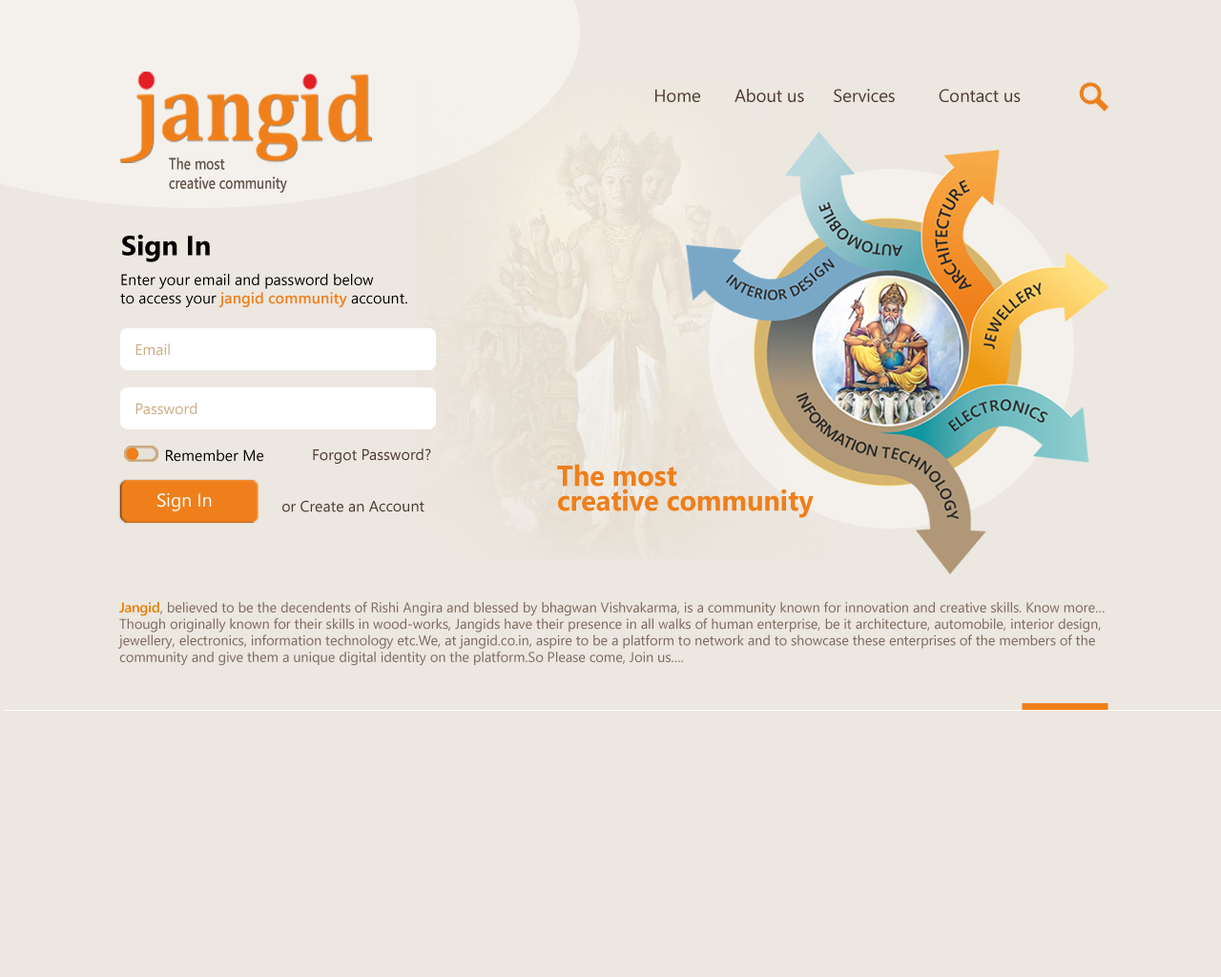
<style>
.page{position:relative;width:1221px;height:977px;background:#ece7e0}
.page>*{position:absolute;margin:0}
.t1{font:17.6px "SegoeUI";color:#4c392f}
.t2{font:16.2px "SegoeUI-Semibold";color:#5f5247;scale:0.81 1}
.t3{font:27.6px "SegoeUI-Bold";color:#000000}
.t4{font:15.3px "SegoeUI";color:#010100}
.t5{font:15.3px "SegoeUI-Semibold";color:#ef7f1a}
.t6{font:15.3px "SegoeUI";color:#ccac85}
.t7{font:15.3px "SegoeUI";color:#4c392f}
.t8{font:29.1px/24.8px "SegoeUI-Bold";color:#ef7f1a;scale:0.94 1}
.t9{font:18.4px "SegoeUI";color:#ffffff}
.t10{font:13.8px "SegoeUI";color:#806c61}
.t11{font:13.8px "SegoeUI-Semibold";color:#e97e00}
</style>
<div class="page">
<p class="t1" style="left:655px;top:89px;width:366px;height:13px">Home       About us      Services         Contact us</p>
<p class="t2" style="left:169px;top:157px;width:118px;height:36px">The most <br>creative community</p>
<p class="t3" style="left:122px;top:235px;width:88px;height:27px">Sign In</p>
<p class="t4" style="left:120px;top:274px;width:287px;height:33px">Enter your email and password below<br>to access your <span class="t5">jangid community</span> account.</p>
<p class="t6" style="left:135px;top:343px;width:35px;height:13px">Email</p>
<p class="t6" style="left:135px;top:403px;width:62px;height:12px">Password</p>
<p class="t4" style="left:166px;top:449px;width:97px;height:13px">Remember Me</p>
<p class="t7" style="left:313px;top:448px;width:118px;height:16px">Forgot Password?</p>
<p class="t8" style="left:557px;top:464px;width:257px;height:54px">The most <br>creative community</p>
<p class="t9" style="left:157px;top:492px;width:55px;height:19px">Sign In</p>
<p class="t7" style="left:282px;top:500px;width:142px;height:12px">or Create an Account</p>
<p class="t10" style="left:117px;top:601px;width:988px;height:65px"><span class="t11">Jangid</span>, believed to be the decendents of Rishi Angira and blessed by bhagwan Vishvakarma, is a community known for innovation and creative skills. Know more… Though originally known for their skills in wood-works, Jangids have their presence in all walks of human enterprise, be it architecture, automobile, interior design, jewellery, electronics, information technology etc.We, at jangid.co.in, aspire to be a platform to network and to showcase these enterprises of the members of the community and give them a unique digital identity on the platform.So Please come, Join us….</p>
</div>
